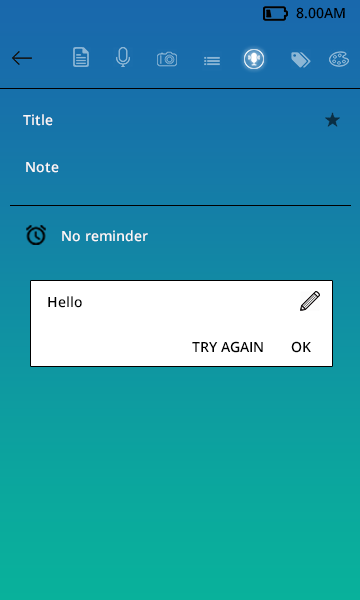
<style>
.page{position:relative;width:360px;height:600px}
.page>*{position:absolute;margin:0}
.t1{font:14px "OpenSans-Semibold";color:#000000}
.t2{font:14px "OpenSans-Semibold";color:#fbf8f8}
</style>
<div class="page">
<p class="t1" style="left:296px;top:7px;width:49px;height:12px">8.00AM</p>
<p class="t2" style="left:23px;top:114px;width:30px;height:12px">Title</p>
<p class="t2" style="left:26px;top:162px;width:33px;height:11px">Note</p>
<p class="t2" style="left:62px;top:230px;width:86px;height:12px">No reminder</p>
<p class="t1" style="left:48px;top:296px;width:34px;height:12px">Hello</p>
<p class="t1" style="left:192px;top:341px;width:71px;height:12px">TRY AGAIN</p>
<p class="t1" style="left:291px;top:341px;width:20px;height:12px">OK</p>
</div>
